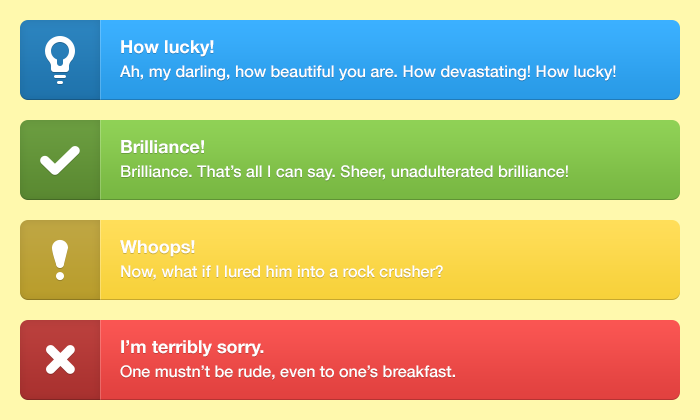
<style>
.page{position:relative;width:700px;height:420px;background:#fff9ad}
.page>*{position:absolute;margin:0}
.t1{font:16px/24px "HelveticaNeue-Medium";color:#ffffff}
.t2{font:18px/24px "HelveticaNeue-Bold";color:#ffffff}
.t3{font:16px/24px "HelveticaNeue-Medium";color:#fffffe}
.t4{font:18px/24px "HelveticaNeue-Bold";color:#fefefe}
.t5{font:16px/24px "HelveticaNeue-Medium";color:#fefefe}
</style>
<div class="page">
<p class="t1" style="left:120px;top:40px;width:496px;height:41px"><span class="t2">How lucky!<br></span>Ah, my darling, how beautiful you are. How devastating! How lucky!</p>
<p class="t1" style="left:121px;top:140px;width:447px;height:41px"><span class="t2">Brilliance!<br></span>Brilliance. That’s all I can say. Sheer, unadulterated brilliance!</p>
<p class="t3" style="left:120px;top:240px;width:323px;height:40px"><span class="t4">Whoops!<br></span>Now, what if I lured him into a rock crusher?</p>
<p class="t5" style="left:120px;top:340px;width:335px;height:40px"><span class="t4">I’m terribly sorry.<br></span>One mustn’t be rude, even to one’s breakfast.</p>
</div>
